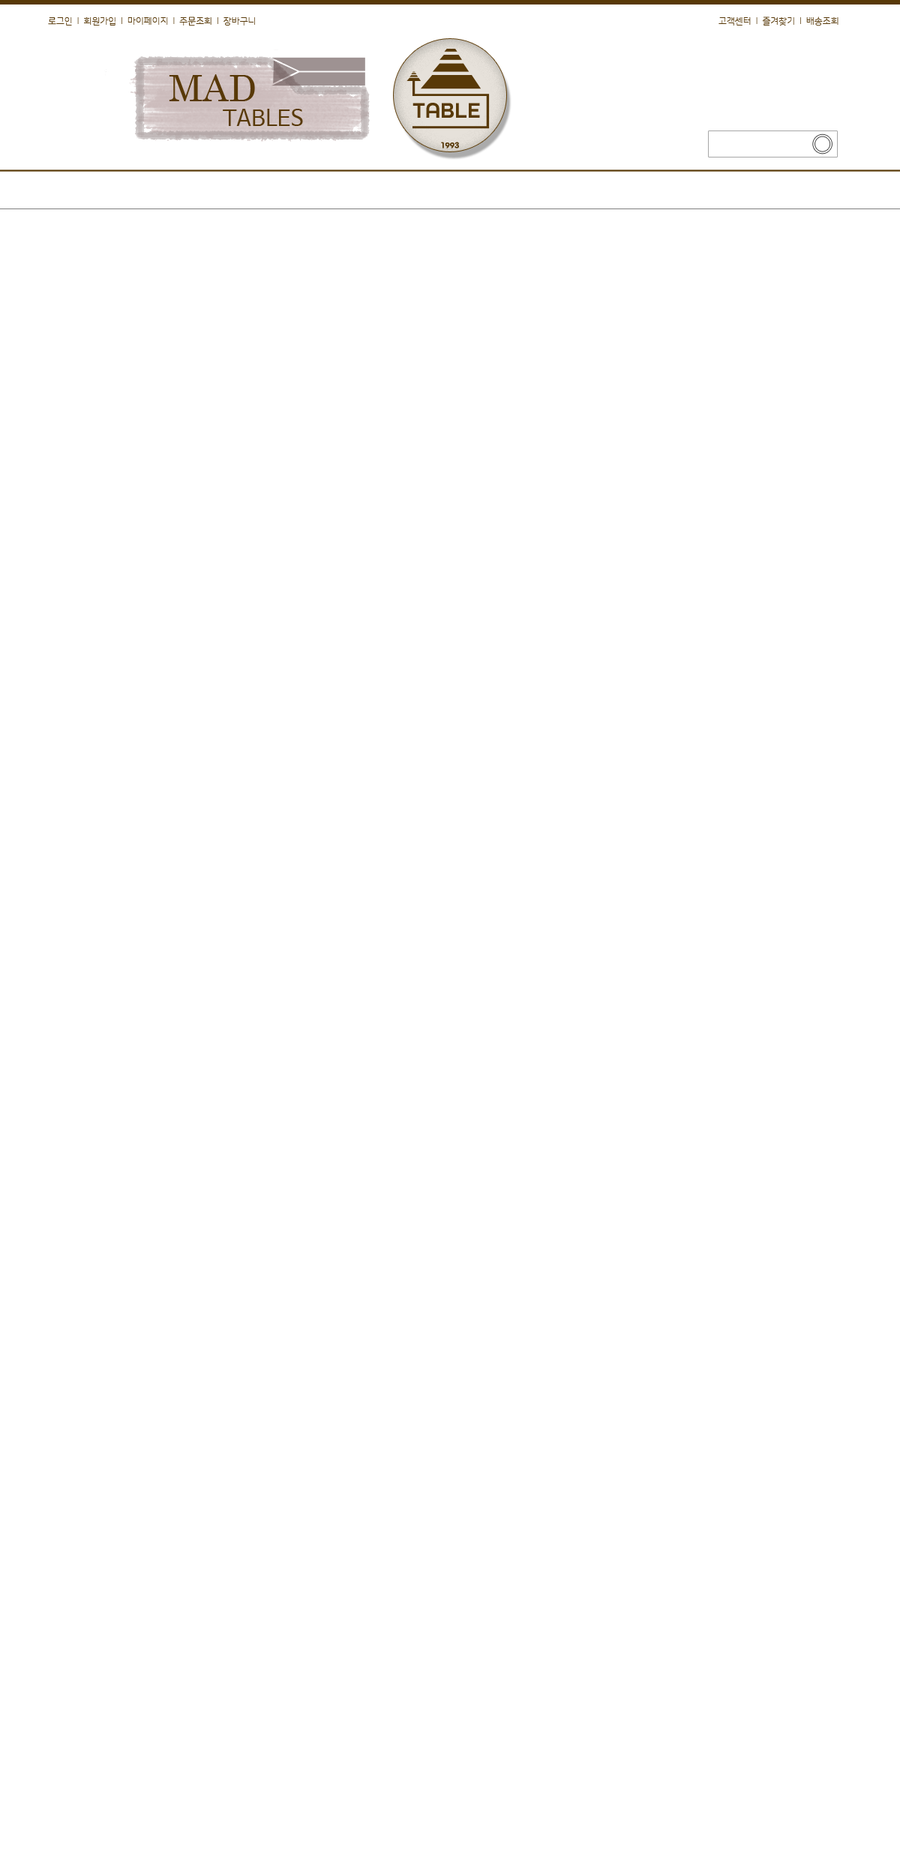
<style>
.page{position:relative;width:900px;height:1875px;background:#ffffff}
.page>*{position:absolute;margin:0}
.t1{font:9px "NanumSquareRoundL";color:#583908}
.t2{font:22.5px/36px "NanumBarunGothic";color:#583908}
.t3{font:36px/36px "Century";color:#583908}
.t4{font:22.5px "AllRoundGothicW01-Demi";color:#583908}
.t5{font:9px "AllRoundGothicW01-Demi";color:#583908}
</style>
<div class="page">
<p class="t1" style="left:48px;top:16px;width:207px;height:10px">로그인  l  회원가입  l  마이페이지  l  주문조회  l  장바구니</p>
<p class="t1" style="left:718px;top:16px;width:120px;height:10px">고객센터  l  즐겨찾기  l  배송조회</p>
<p class="t2" style="left:169px;top:74px;width:134px;height:52px"><span class="t3">MAD<br></span>  TABLES</p>
<p class="t4" style="left:412px;top:103px;width:68px;height:15px">TABLE</p>
<p class="t5" style="left:441px;top:142px;width:18px;height:6px">1993</p>
</div>
